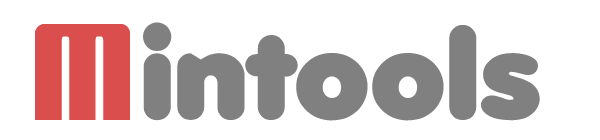
<style>
.page{position:relative;width:600px;height:140px;background:#ffffff}
.page>*{position:absolute;margin:0}
.t1{font:120px "MyPuma";color:#db4e4e}
.t2{font:120px "Debussy";color:#808080}
</style>
<div class="page">
<p class="t1" style="left:35px;top:24px;width:95px;height:96px">M</p>
<p class="t2" style="left:143px;top:22px;width:397px;height:99px">intools</p>
</div>
